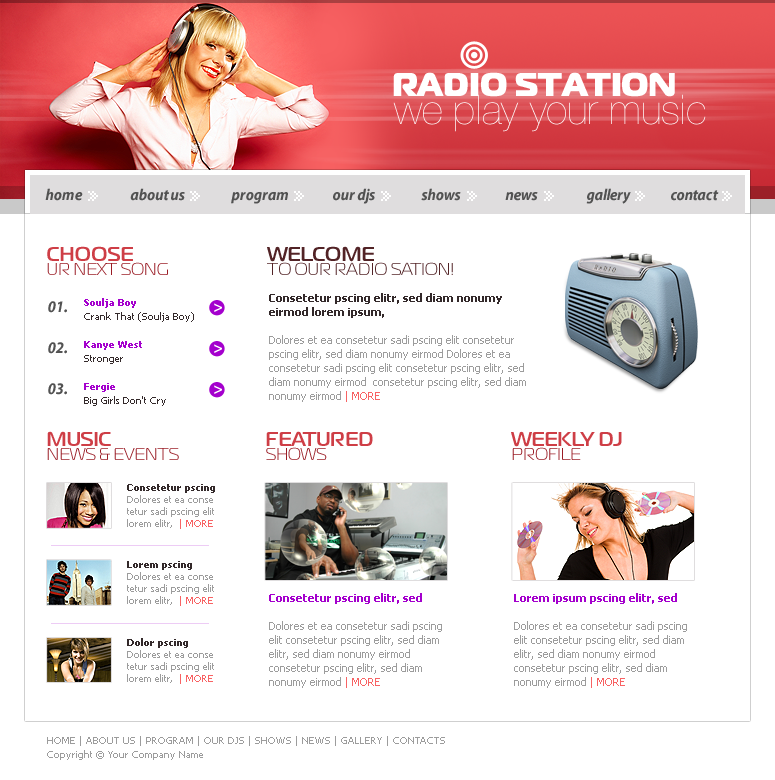
<style>
.page{position:relative;width:775px;height:780px;background:#ffffff}
.page>*{position:absolute;margin:0}
.t1{font:33px "MagistralBlackC";color:#ffffff}
.t2{font:41px "HelveticaNeueLTPro-UltLt";color:#ffffff}
.t3{font:16px "MyriadPro-BoldSemiCnIt";color:#525252}
.t4{font:17px/13.8px "MagistralC";color:#9a1c25}
.t5{font:20px/13.8px "MagistralC-Bold";color:#ce3e46}
.t6{font:17px/13.8px "MagistralC";color:#522326}
.t7{font:20px/13.8px "MagistralC-Bold";color:#522326}
.t8{font:11px/14px "Tahoma";color:#9c9c9c}
.t9{font:11px/14px "Tahoma-Bold";color:#33292a}
.t10{font:11px/14px "Tahoma";color:#f86364}
.t11{font:10px/14px "Tahoma";color:#33292a}
.t12{font:10px/14px "Tahoma-Bold";color:#a400cd}
.t13{font:10px/12px "Tahoma";color:#9c9c9c}
.t14{font:10px/12px "Tahoma-Bold";color:#33292a}
.t15{font:10px/12px "Tahoma";color:#f86364}
.t16{font:11px/14px "Tahoma-Bold";color:#a400cd}
.t17{font:10px/14px "Tahoma";color:#9c9c9c}
</style>
<div class="page">
<p class="t1" style="left:393px;top:72px;width:282px;height:25px">RADIO STATION</p>
<p class="t2" style="left:393px;top:94px;width:313px;height:38px">we play your music</p>
<p class="t3" style="left:45px;top:188px;width:38px;height:13px">home</p>
<p class="t3" style="left:130px;top:188px;width:55px;height:13px">about us</p>
<p class="t3" style="left:231px;top:192px;width:57px;height:12px">program</p>
<p class="t3" style="left:333px;top:188px;width:42px;height:16px">our djs</p>
<p class="t3" style="left:421px;top:188px;width:40px;height:13px">shows</p>
<p class="t3" style="left:505px;top:192px;width:33px;height:9px">news</p>
<p class="t3" style="left:586px;top:188px;width:45px;height:16px">gallery</p>
<p class="t3" style="left:671px;top:190px;width:48px;height:11px">contact</p>
<p class="t4" style="left:47px;top:246px;width:121px;height:29px"><span class="t5">CHOOSE <br></span>UR NEXT SONG</p>
<p class="t6" style="left:267px;top:246px;width:186px;height:29px"><span class="t7">WELCOME<br></span>TO OUR RADIO SATION!</p>
<p class="t8" style="left:269px;top:293px;width:257px;height:109px"><span class="t9">Consetetur pscing elitr, sed diam nonumy eirmod lorem ipsum, <br><br></span>Dolores et ea consetetur sadi pscing elit consetetur pscing elitr, sed diam nonumy eirmod Dolores et ea consetetur sadi pscing elit consetetur pscing elitr, sed diam nonumy eirmod  consetetur pscing elitr, sed diam nonumy eirmod <span class="t10">| MORE</span></p>
<p class="t3" style="left:48px;top:301px;width:19px;height:12px">01.</p>
<p class="t11" style="left:84px;top:298px;width:110px;height:108px"><span class="t12">Soulja Boy<br></span>Crank That (Soulja Boy)<br><br><span class="t12">Kanye West<br></span>Stronger<br><br><span class="t12">Fergie<br></span>Big Girls Don't Cry</p>
<p class="t3" style="left:48px;top:342px;width:19px;height:12px">02.</p>
<p class="t3" style="left:48px;top:383px;width:19px;height:12px">03.</p>
<p class="t4" style="left:47px;top:431px;width:132px;height:29px"><span class="t5">MUSIC<br></span>NEWS &amp; EVENTS</p>
<p class="t5" style="left:266px;top:431px;width:107px;height:29px">FEATURED<br><span class="t4">SHOWS</span></p>
<p class="t5" style="left:511px;top:431px;width:111px;height:29px">WEEKLY DJ<br><span class="t4">PROFILE</span></p>
<p class="t13" style="left:127px;top:484px;width:88px;height:45px"><span class="t14">Consetetur pscing <br></span>Dolores et ea conse tetur sadi pscing elit lorem elitr,  <span class="t15">| MORE</span></p>
<p class="t13" style="left:127px;top:561px;width:87px;height:45px"><span class="t14">Lorem pscing <br></span>Dolores et ea conse tetur sadi pscing elit lorem elitr,  <span class="t15">| MORE</span></p>
<p class="t8" style="left:269px;top:593px;width:173px;height:95px"><span class="t16">Consetetur pscing elitr, sed <br><br></span>Dolores et ea consetetur sadi pscing elit consetetur pscing elitr, sed diam elitr, sed diam nonumy eirmod  consetetur pscing elitr, sed diam nonumy eirmod <span class="t10">| MORE</span></p>
<p class="t8" style="left:514px;top:593px;width:173px;height:95px"><span class="t16">Lorem ipsum pscing elitr, sed <br><br></span>Dolores et ea consetetur sadi pscing elit consetetur pscing elitr, sed diam elitr, sed diam nonumy eirmod  consetetur pscing elitr, sed diam nonumy eirmod <span class="t10">| MORE</span></p>
<p class="t13" style="left:127px;top:638px;width:87px;height:46px"><span class="t14">Dolor pscing <br></span>Dolores et ea conse tetur sadi pscing elit lorem elitr,  <span class="t15">| MORE</span></p>
<p class="t17" style="left:47px;top:736px;width:398px;height:24px">HOME | ABOUT US | PROGRAM | OUR DJS | SHOWS | NEWS | GALLERY | CONTACTS<br>Copyright © Your Company Name</p>
</div>
